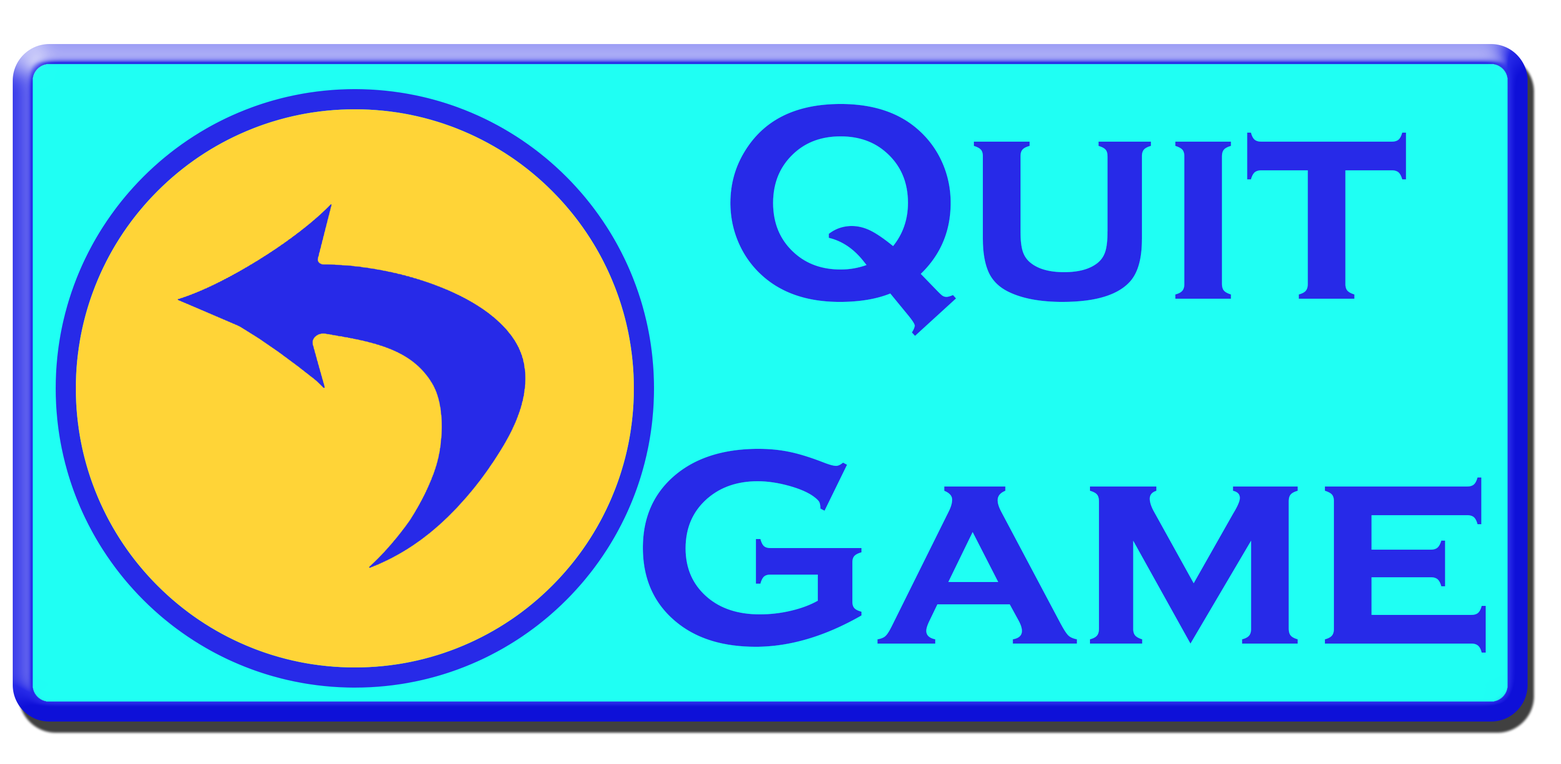
<style>
.page{position:relative;width:1561px;height:764px;background:#1ffff3}
.page>*{position:absolute;margin:0}
.t1{font:287.3px "CopperplateGothic-Bold";color:#272ae8}
</style>
<div class="page">
<p class="t1" style="left:643px;top:104px;width:843px;height:548px;text-align:center">Quit Game</p>
</div>
